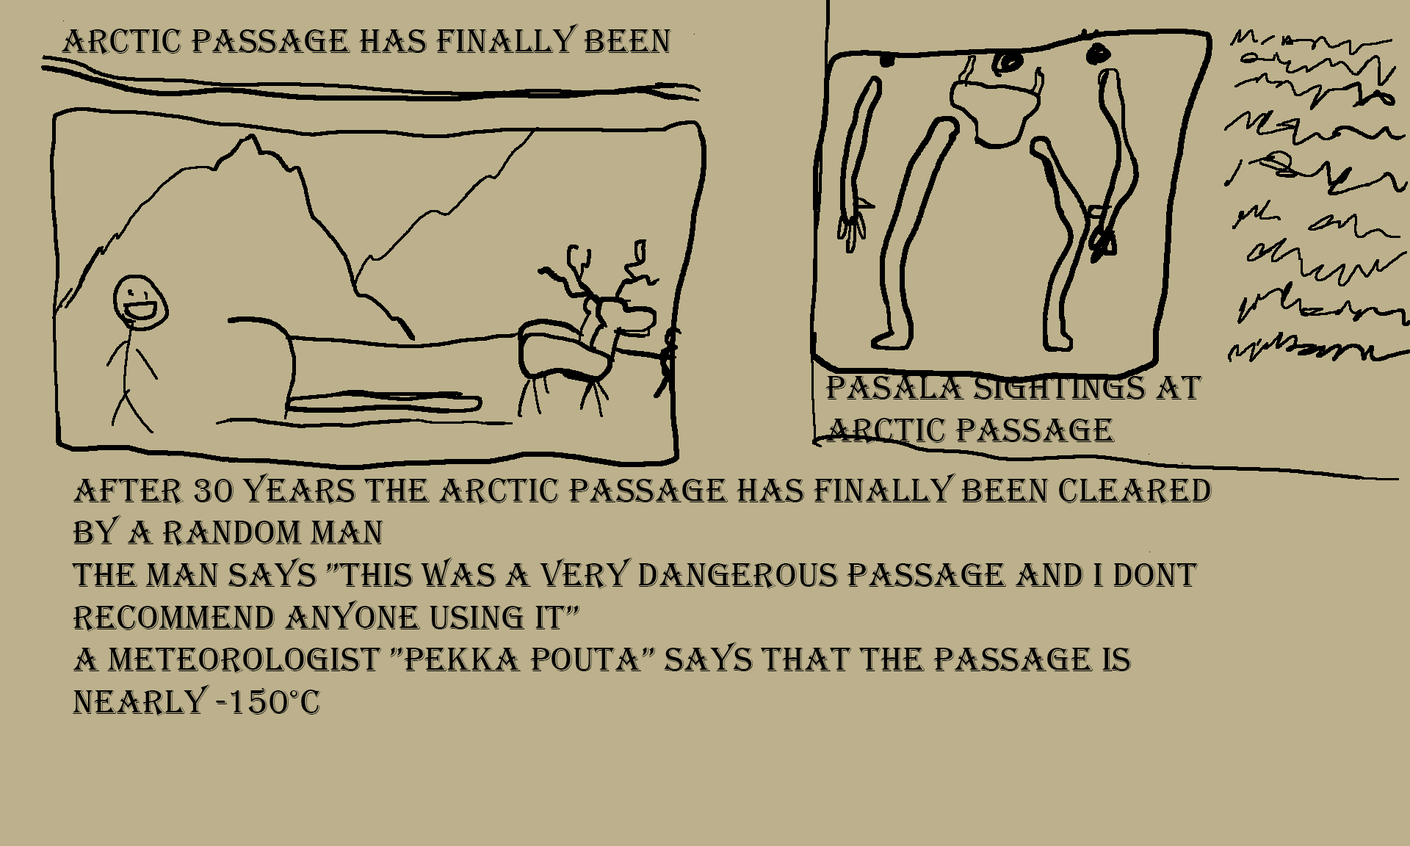
<style>
.page{position:relative;width:1410px;height:846px;background:#bcb18c}
.page>*{position:absolute;margin:0}
.t1{font:35.2px "Algerian";color:#000000}
</style>
<div class="page">
<p class="t1" style="left:61px;top:23px;width:611px;height:33px">Arctic Passage has finally been cleared!</p>
<p class="t1" style="left:825px;top:376px;width:378px;height:69px">Pasala sightings at arctic passage</p>
<p class="t1" style="left:72px;top:473px;width:1140px;height:244px">After 30 years the Arctic passage has finally been cleared by a random man<br>The man says ”this was a very dangerous passage and i dont recommend anyone using it”<br>a meteorologist ”pekka pouta” says that the passage is nearly -150°C</p>
</div>
